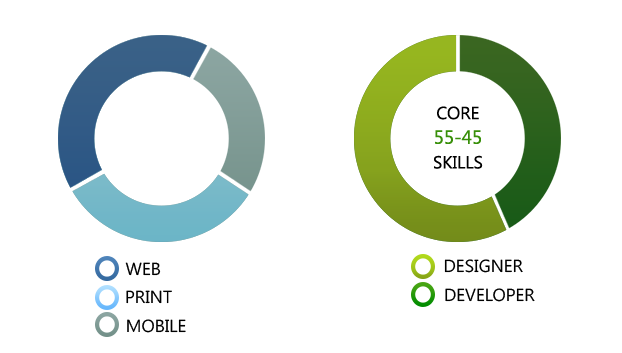
<style>
.page{position:relative;width:622px;height:353px;background:#ffffff}
.page>*{position:absolute;margin:0}
.t1{font:17.5px/8.2px "SegoeUI";color:#000000}
.t2{font:19px/8.2px "SegoeUI";color:#388f09}
.t3{font:17.5px "SegoeUI";color:#000000}
</style>
<div class="page">
<p class="t1" style="left:434px;top:106px;width:49px;height:63px;text-align:center">CORE<br><br><br><span class="t2">55-45<br></span><br><br>SKILLS</p>
<p class="t3" style="left:125px;top:262px;width:36px;height:14px">WEB</p>
<p class="t3" style="left:444px;top:259px;width:79px;height:14px">DESIGNER</p>
<p class="t3" style="left:126px;top:290px;width:46px;height:14px">PRINT</p>
<p class="t3" style="left:445px;top:288px;width:90px;height:14px">DEVELOPER</p>
<p class="t3" style="left:127px;top:319px;width:59px;height:14px">MOBILE</p>
</div>
